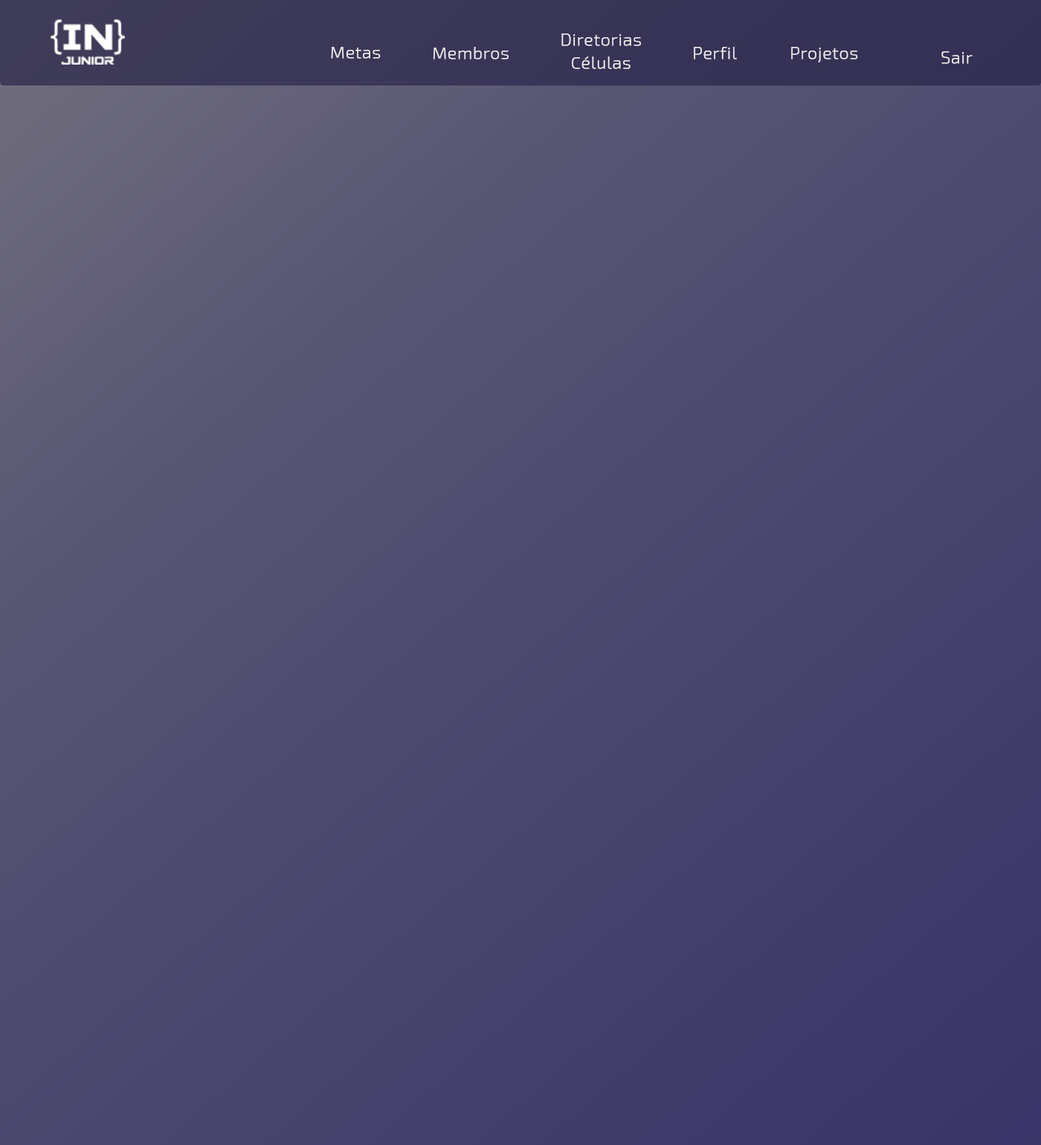
<style>
.page{position:relative;width:1041px;height:1145px}
.page>*{position:absolute;margin:0}
.t1{font:16.8px/23.3px "Exo2-ExtraLight";letter-spacing:0.025em;color:#eeeeee;font-weight:bold}
.t2{font:16.8px "Exo2-ExtraLight";letter-spacing:0.025em;color:#eeeeee;font-weight:bold}
</style>
<div class="page">
<p class="t1" style="left:561px;top:33px;width:80px;height:36px;text-align:center">Diretorias<br>Células</p>
<p class="t2" style="left:331px;top:47px;width:50px;height:12px">Metas</p>
<p class="t2" style="left:433px;top:47px;width:76px;height:12px">Membros</p>
<p class="t2" style="left:694px;top:47px;width:43px;height:12px">Perfil</p>
<p class="t2" style="left:791px;top:47px;width:67px;height:15px">Projetos</p>
<p class="t2" style="left:942px;top:51px;width:31px;height:13px">Sair</p>
</div>
